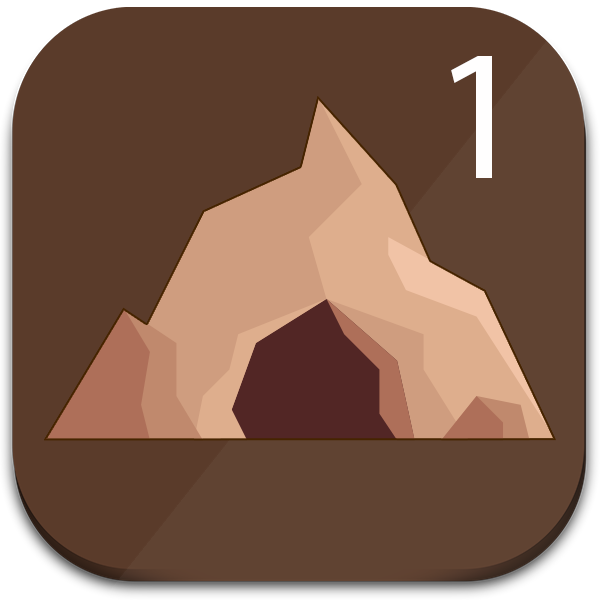
<style>
.page{position:relative;width:600px;height:600px;background:#5a3b2a}
.page>*{position:absolute;margin:0}
.t1{font:187.5px "MyriadPro-Regular";color:#fffefe}
</style>
<div class="page">
<p class="t1" style="left:451px;top:56px;width:41px;height:122px">1</p>
</div>
